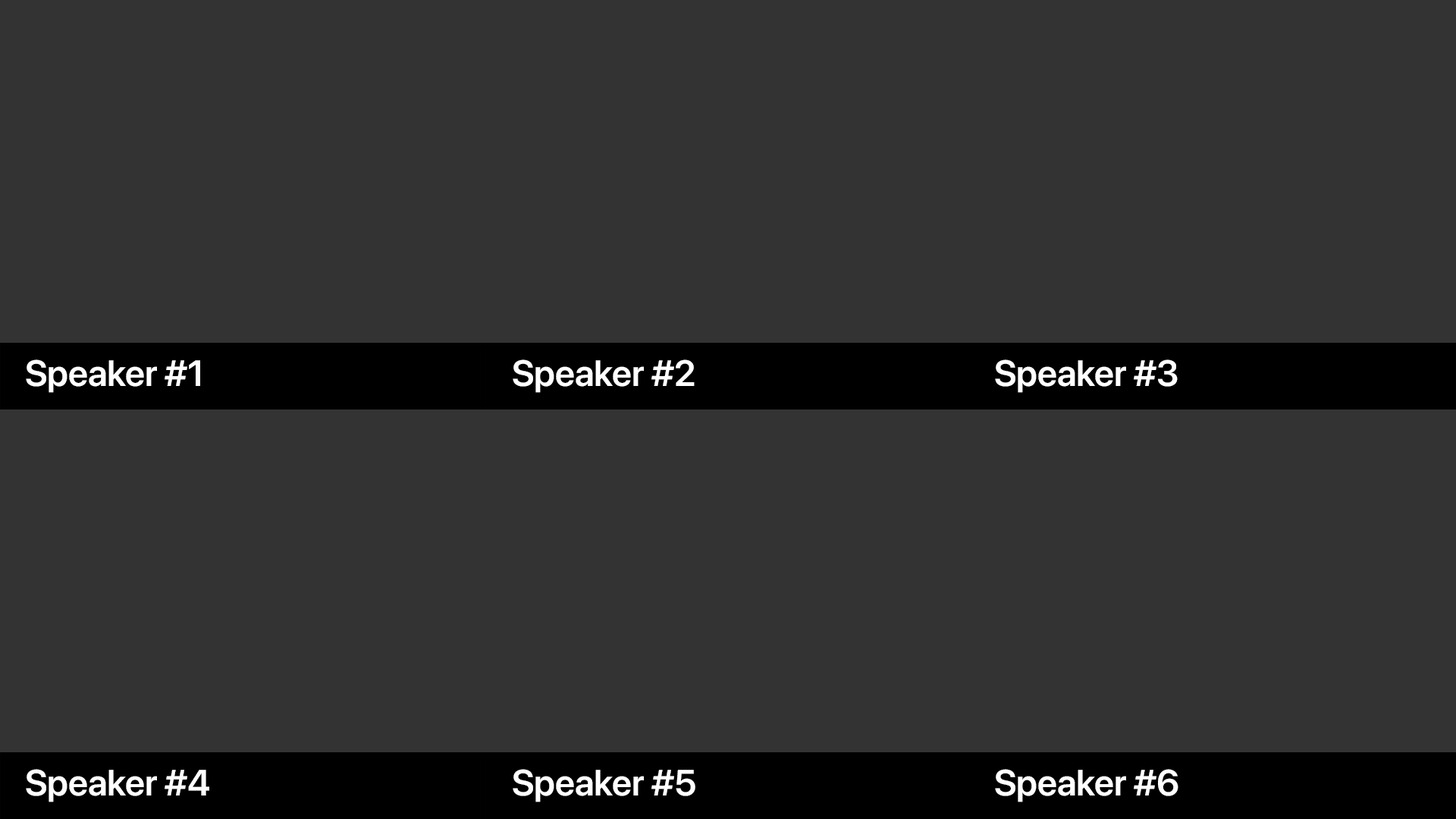
<style>
.page{position:relative;width:1456px;height:819px;background:#333333}
.page>*{position:absolute;margin:0}
.t1{font:36.4px "SFProDisplay-Semibold";color:#ffffff}
</style>
<div class="page">
<p class="t1" style="left:26px;top:359px;width:174px;height:34px">Speaker #1</p>
<p class="t1" style="left:513px;top:359px;width:182px;height:34px">Speaker #2</p>
<p class="t1" style="left:995px;top:359px;width:183px;height:34px">Speaker #3</p>
<p class="t1" style="left:26px;top:769px;width:183px;height:33px">Speaker #4</p>
<p class="t1" style="left:513px;top:769px;width:182px;height:33px">Speaker #5</p>
<p class="t1" style="left:995px;top:769px;width:183px;height:33px">Speaker #6</p>
</div>
